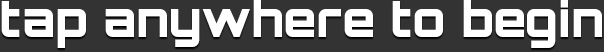
<style>
.page{position:relative;width:604px;height:52px;background:#333333}
.page>*{position:absolute;margin:0}
.t1{font:48px "Orbitron-Black";color:#ffffff}
</style>
<div class="page">
<p class="t1" style="left:1px;top:0px;width:601px;height:48px">tap anywhere to begin</p>
</div>
